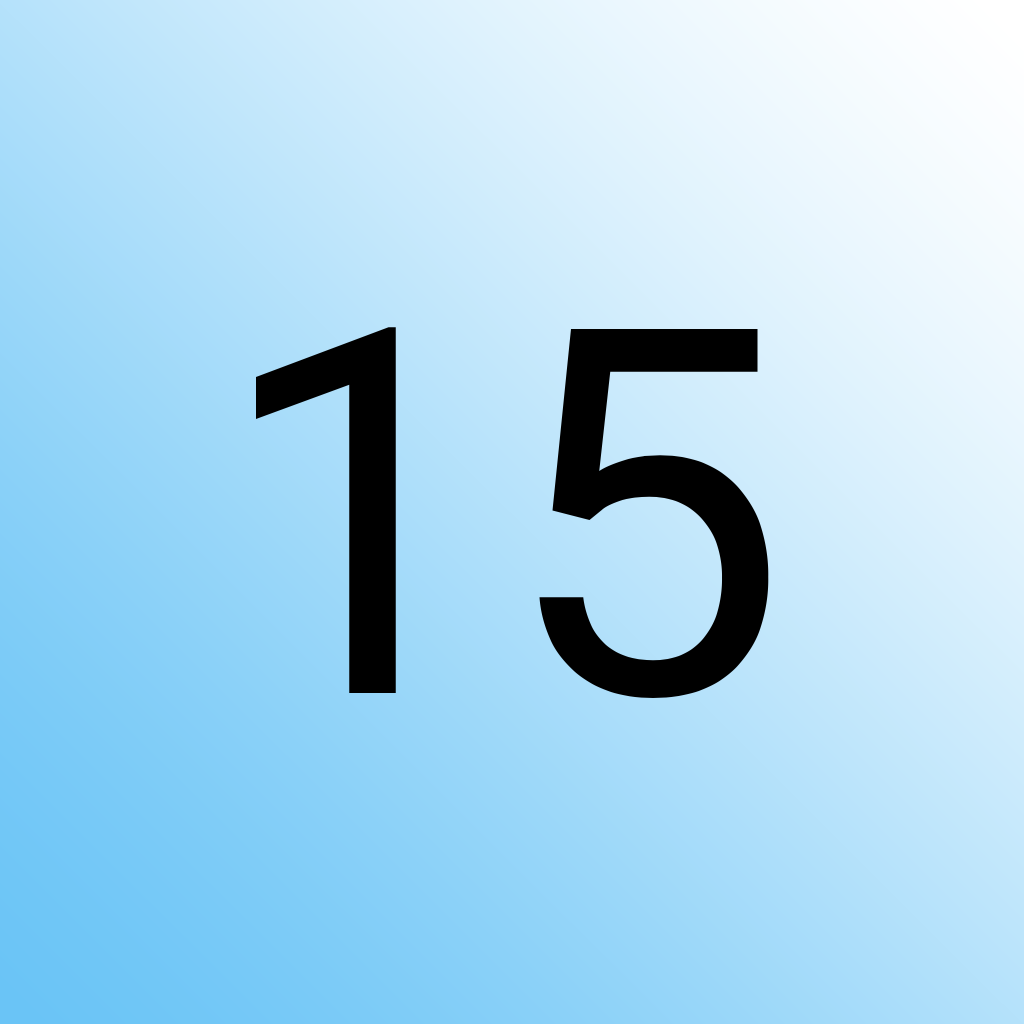
<style>
.page{position:relative;width:1024px;height:1024px}
.page>*{position:absolute;margin:0}
.t1{font:512px "Roboto-Regular";color:#000000}
</style>
<div class="page">
<p class="t1" style="left:256px;top:327px;width:513px;height:371px">15</p>
</div>
